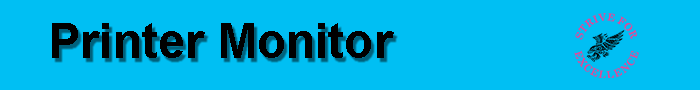
<style>
.page{position:relative;width:700px;height:90px;background:#00bff3}
.page>*{position:absolute;margin:0}
.t1{font:48px "Arial-BoldMT";color:#000000}
</style>
<div class="page">
<p class="t1" style="left:52px;top:23px;width:342px;height:35px">Printer Monitor</p>
</div>
